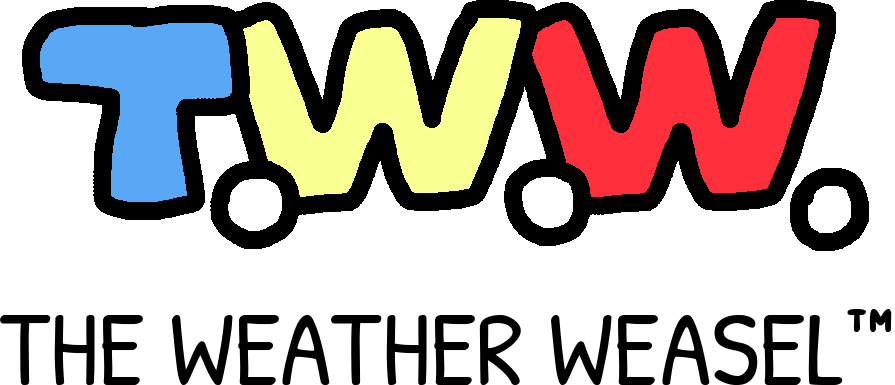
<style>
.page{position:relative;width:895px;height:385px;background:#ffffff}
.page>*{position:absolute;margin:0}
.t1{font:105.2px "PatrickHandSC-Regular";color:#000000}
</style>
<div class="page">
<p class="t1" style="left:0px;top:309px;width:892px;height:76px">THE WEATHER WEASEL™</p>
</div>
